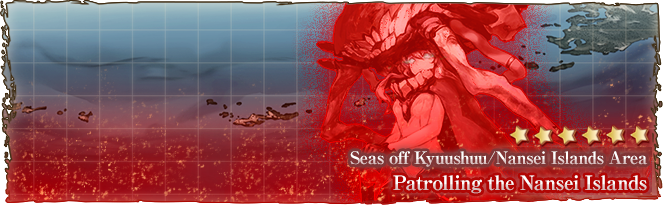
<style>
.page{position:relative;width:663px;height:205px}
.page>*{position:absolute;margin:0}
.t1{font:17px "RyuminPro-ExBold";letter-spacing:-0.04em}
.t2{font:20px "RyuminPro-ExBold";letter-spacing:-0.04em}
</style>
<div class="page">
<p class="t1" style="left:350px;top:151px;width:298px;height:16px">Seas off Kyuushuu/Nansei Islands Area</p>
<p class="t2" style="left:393px;top:175px;width:254px;height:19px">Patrolling the Nansei Islands</p>
</div>
